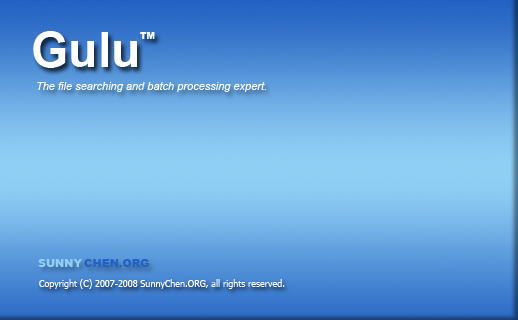
<style>
.page{position:relative;width:518px;height:320px}
.page>*{position:absolute;margin:0}
.t1{font:48px "Arial-BoldMT";color:#ffffff}
.t2{font:9px "Arial-Black";color:#ffffff}
.t3{font:11px "Arial-ItalicMT";color:#ffffff}
.t4{font:11px "Arial-Black";color:#90cff5}
.t5{font:11px "Arial-Black";color:#2461c2}
.t6{font:9px "Tahoma";color:#ffffff}
</style>
<div class="page">
<p class="t1" style="left:33px;top:31px;width:104px;height:37px">Gulu</p>
<p class="t2" style="left:140px;top:32px;width:15px;height:7px">TM</p>
<p class="t3" style="left:37px;top:82px;width:229px;height:10px">The file searching and batch processing expert.</p>
<p class="t4" style="left:38px;top:259px;width:44px;height:8px">SUNNY</p>
<p class="t5" style="left:84px;top:259px;width:65px;height:8px">CHEN.ORG</p>
<p class="t6" style="left:39px;top:279px;width:246px;height:10px">Copyright (C) 2007-2008 SunnyChen.ORG, all rights reserved.</p>
</div>
